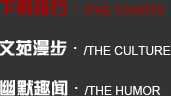
<style>
.page{position:relative;width:171px;height:96px;background:#333333}
.page>*{position:absolute;margin:0}
.t1{font:17.3px "FZZYK--GBK1-0";color:#ac0001}
.t2{font:12px "ArialMT";color:#ac0001}
.t3{font:19.4px "ArialMT";color:#ac0001}
.t4{font:17.3px "FZZYK--GBK1-0";color:#ffffff}
.t5{font:12px "ArialMT";color:#ffffff}
.t6{font:19.4px "ArialMT";color:#ffffff}
</style>
<div class="page">
<p class="t1" style="left:0px;top:0px;width:67px;height:16px">下载排行</p>
<p class="t2" style="left:75px;top:6px;width:89px;height:9px"><span class="t3">· </span>/THE CHARTS</p>
<p class="t4" style="left:0px;top:40px;width:67px;height:16px">文苑漫步</p>
<p class="t5" style="left:74px;top:46px;width:97px;height:9px"><span class="t6">· </span>/THE CULTURE</p>
<p class="t4" style="left:0px;top:80px;width:68px;height:16px">幽默趣闻</p>
<p class="t5" style="left:75px;top:86px;width:86px;height:9px"><span class="t6">· </span>/THE HUMOR</p>
</div>
